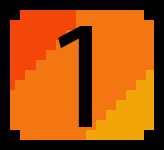
<style>
.page{position:relative;width:164px;height:150px;background:#f37613}
.page>*{position:absolute;margin:0}
.t1{font:155.9px "MyriadPro-Regular";color:#000000}
</style>
<div class="page">
<p class="t1" style="left:58px;top:26px;width:34px;height:101px">1</p>
</div>
